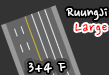
<style>
.page{position:relative;width:109px;height:75px;background:#333333}
.page>*{position:absolute;margin:0}
.t1{font:16px "NanumPen";color:#ffffff}
.t2{font:16px "NanumPen";letter-spacing:0.05em;color:#ff0000}
.t3{font:18px "NanumPen";letter-spacing:0.05em;color:#ffffff}
</style>
<div class="page">
<p class="t1" style="left:66px;top:8px;width:42px;height:12px">RuungJi</p>
<p class="t2" style="left:75px;top:23px;width:32px;height:12px">Large</p>
<p class="t3" style="left:28px;top:62px;width:38px;height:11px">3+4 F</p>
</div>
